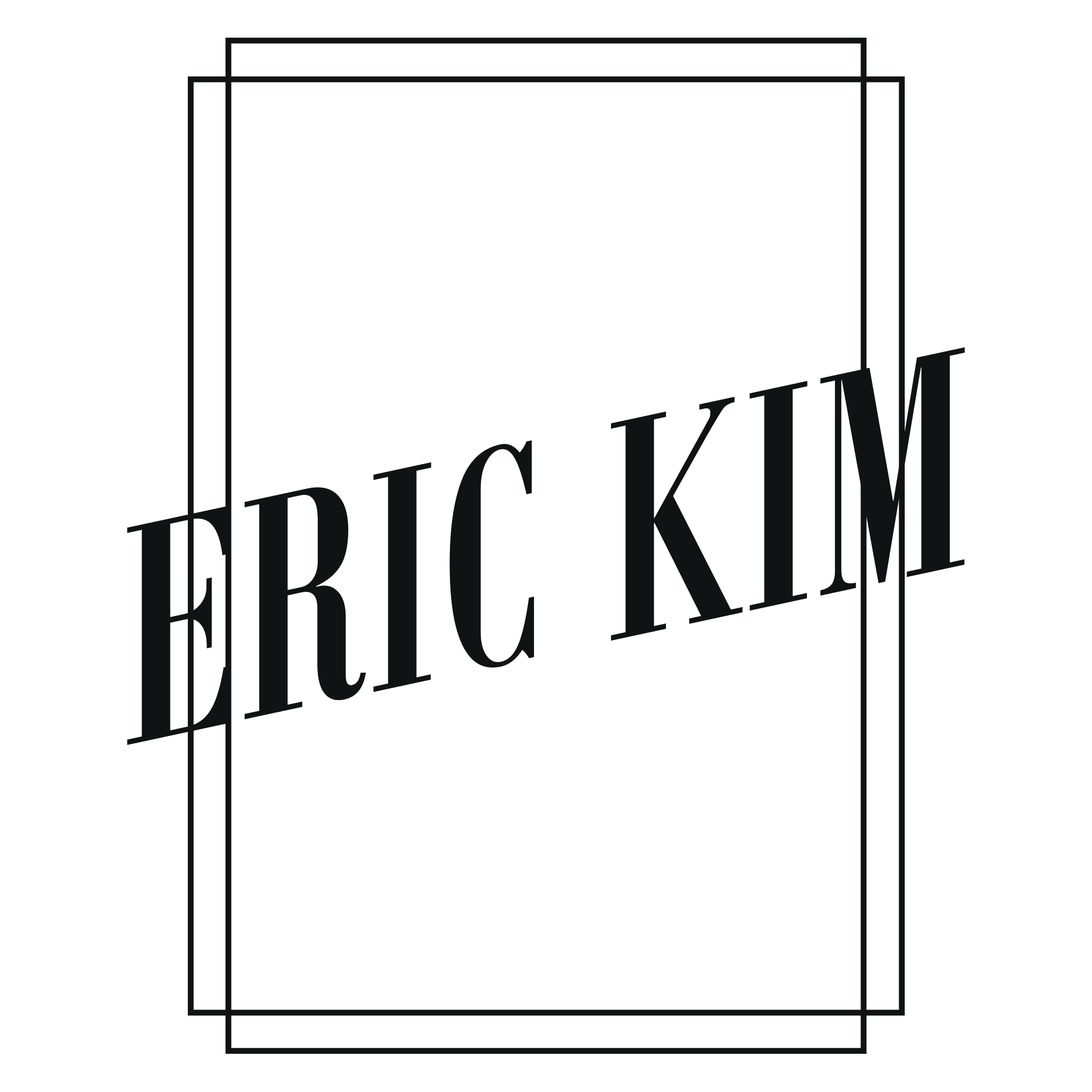
<style>
.page{position:relative;width:1092px;height:1092px;background:#ffffff}
.page>*{position:absolute;margin:0}
.t1{font:341.2px "BodoniMTCondensed";color:#0f1313}
</style>
<div class="page">
<p class="t1" style="left:127px;top:347px;width:838px;height:398px;rotate:-12deg">ERIC KIM</p>
</div>
